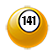
<style>
.page{position:relative;width:55px;height:55px;background:#ffffff}
.page>*{position:absolute;margin:0}
.t1{font:11.3px "Impact";color:#000000}
</style>
<div class="page">
<p class="t1" style="left:22px;top:16px;width:14px;height:9px">141</p>
</div>
